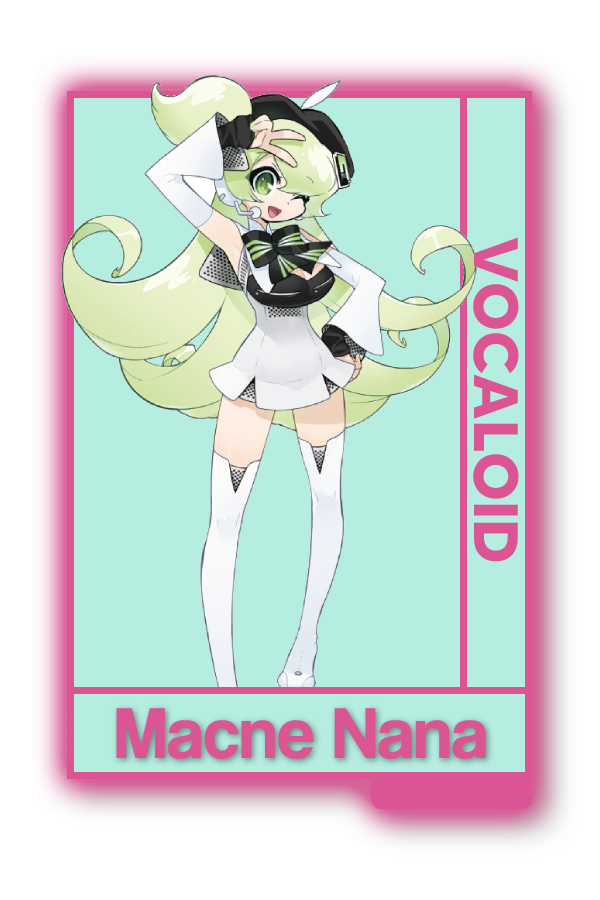
<style>
.page{position:relative;width:600px;height:900px;background:#b5ede1}
.page>*{position:absolute;margin:0}
.t1{font:62.5px "MADETOMMY-Bold";color:#db5493}
.t2{font:75px "CoolveticaRg-Regular";color:#db5493}
</style>
<div class="page">
<p class="t1" style="left:473px;top:237px;width:46px;height:325px;rotate:90deg">VOCALOID</p>
<p class="t2" style="left:116px;top:708px;width:370px;height:51px">Macne Nana</p>
</div>
